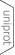
<style>
.page{position:relative;width:15px;height:55px;background:#fefefe}
.page>*{position:absolute;margin:0}
.t1{font:11px "Tahoma";letter-spacing:0.01em;color:#8e8e8e}
</style>
<div class="page">
<p class="t1" style="left:1px;top:10px;width:11px;height:35px;rotate:90deg">uniprot</p>
</div>
